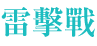
<style>
.page{position:relative;width:97px;height:46px;background:#ffffff}
.page>*{position:absolute;margin:0}
.t1{font:32px "RyuminPr6N-ExBold";color:#1dbdc0}
</style>
<div class="page">
<p class="t1" style="left:1px;top:7px;width:94px;height:30px">雷擊戰</p>
</div>
